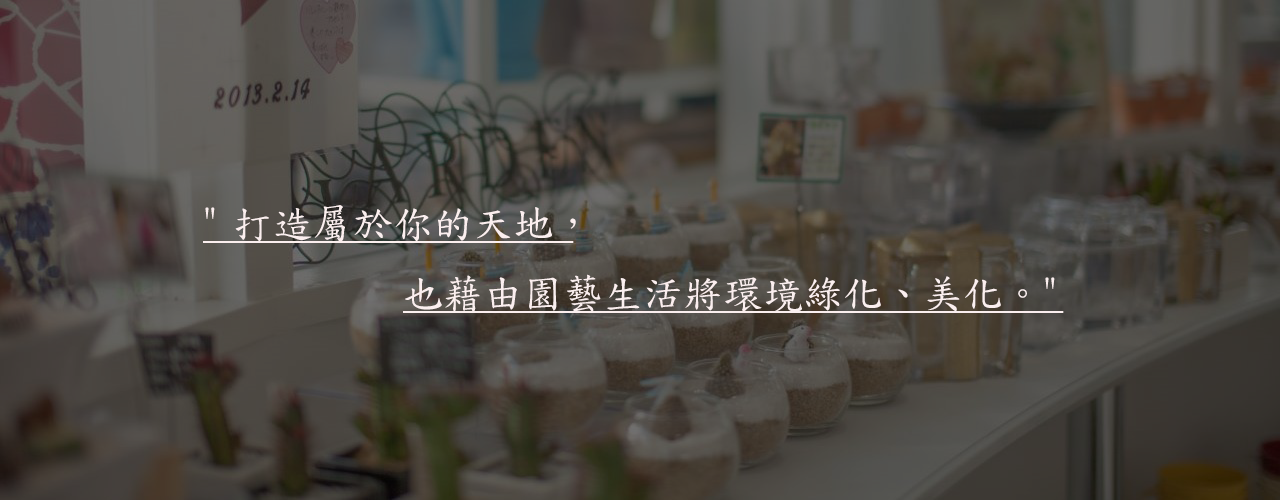
<style>
.page{position:relative;width:1280px;height:500px}
.page>*{position:absolute;margin:0}
.t1{font:40px "DFKaiShu-SB-Estd-BF";color:#fbefef;text-decoration:underline}
</style>
<div class="page">
<p class="t1" style="left:203px;top:205px;width:861px;height:108px">"打造屬於你的天地，<br>          也藉由園藝生活將環境綠化、美化。"</p>
</div>
